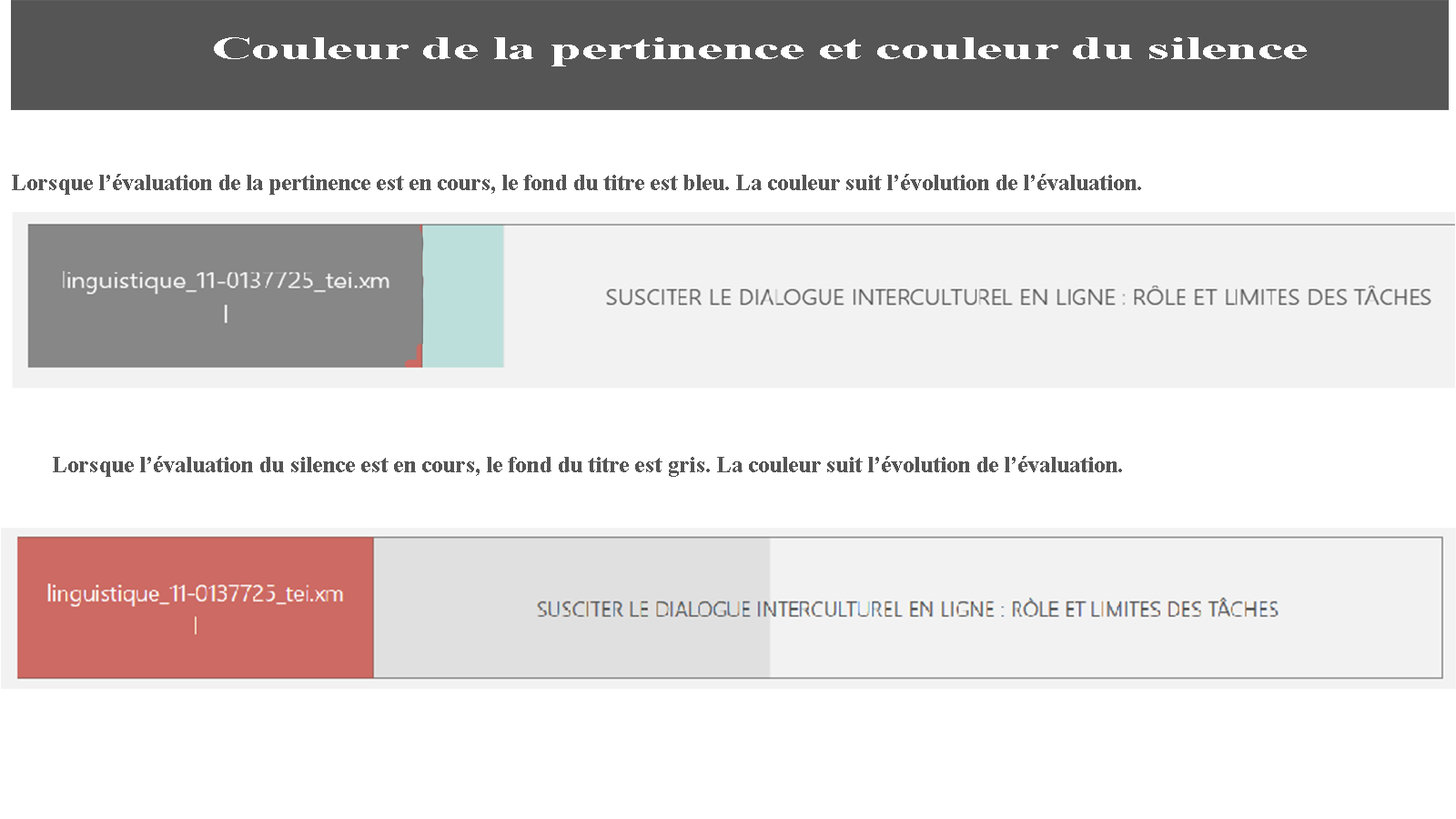
<style>
.page{position:relative;width:1456px;height:819px;background:#ffffff}
.page>*{position:absolute;margin:0}
.t1{font:33.2px "TimesNewRomanPS-BoldMT";color:#ffffff;scale:1.7 1}
.t2{font:22.7px "TimesNewRomanPS-BoldMT";color:#555555}
.t3{font:10.9px "TimesNewRomanPS-BoldMT";color:#555555}
</style>
<div class="page">
<p class="t1" style="left:214px;top:37px;width:1093px;height:29px">Couleur de la pertinence et couleur du silence</p>
<p class="t2" style="left:12px;top:174px;width:1129px;height:21px">Lorsque l’évaluation de la pertinence est en cours, le fond du titre est bleu. La couleur suit l’évolution de l’évaluation.</p>
<p class="t3" style="left:53px;top:456px;width:1069px;height:21px">Lorsque l’évaluation du silence est en cours, le fond du titre est gris. La couleur suit l’évolution de l’évaluation.</p>
</div>
